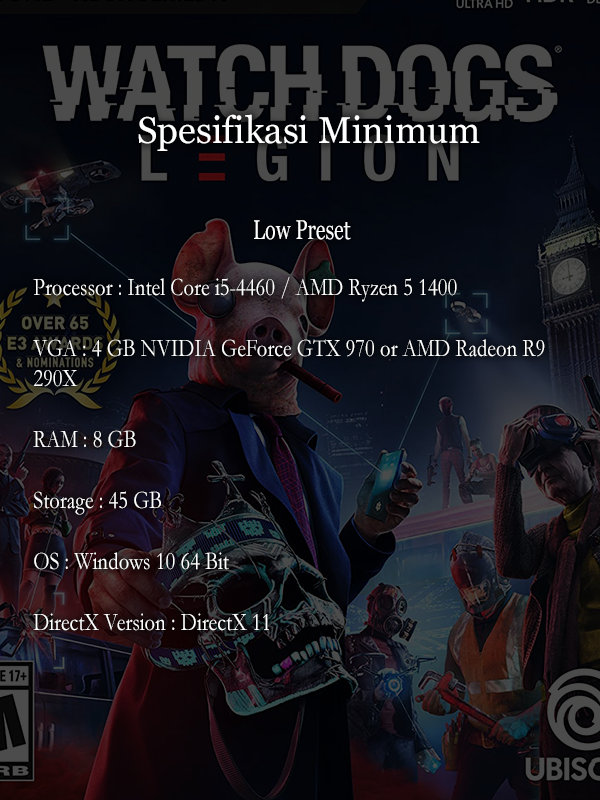
<style>
.page{position:relative;width:600px;height:800px}
.page>*{position:absolute;margin:0}
.t1{font:37.2px "Georgia";color:#ffffff}
.t2{font:27px "Georgia";color:#ffffff;scale:0.74 1}
.t3{font:25.4px "Garamond";color:#ffffff;scale:0.82 1}
</style>
<div class="page">
<p class="t1" style="left:138px;top:114px;width:342px;height:37px">Spesifikasi Minimum</p>
<p class="t2" style="left:254px;top:220px;width:97px;height:20px">Low Preset</p>
<p class="t3" style="left:33px;top:277px;width:512px;height:354px">Processor : Intel Core i5-4460 / AMD Ryzen 5 1400<br><br>VGA : 4 GB NVIDIA GeForce GTX 970 or AMD Radeon R9 290X<br><br>RAM : 8 GB<br> <br>Storage : 45 GB<br><br>OS : Windows 10 64 Bit <br><br>DirectX Version : DirectX 11</p>
</div>
